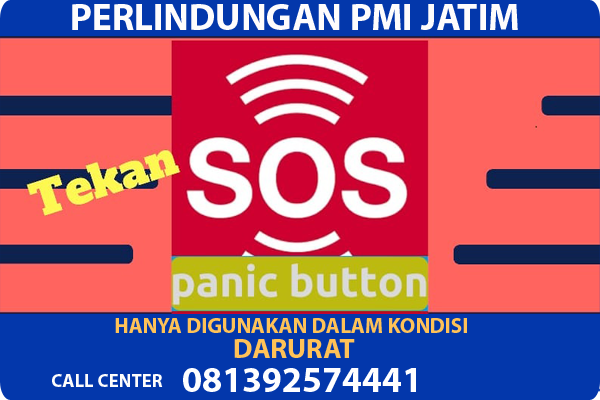
<style>
.page{position:relative;width:600px;height:400px;background:#0337ab}
.page>*{position:absolute;margin:0}
.t1{font:37.3px "MyriadPro-Bold";color:#fefcfc}
.t2{font:21.3px "MyriadPro-Bold";color:#ffc257}
.t3{font:28px "MyriadPro-Bold";color:#ffc257}
.t4{font:18.7px "MyriadPro-Bold";color:#fefdfc}
.t5{font:36px "MyriadPro-Bold";color:#fefeff}
</style>
<div class="page">
<p class="t1" style="left:72px;top:4px;width:446px;height:26px">PERLINDUNGAN PMI JATIM</p>
<p class="t2" style="left:115px;top:318px;width:352px;height:15px">HANYA DIGUNAKAN DALAM KONDISI</p>
<p class="t3" style="left:234px;top:339px;width:121px;height:19px">DARURAT</p>
<p class="t4" style="left:52px;top:374px;width:111px;height:13px">CALL CENTER</p>
<p class="t5" style="left:183px;top:368px;width:233px;height:24px">081392574441</p>
</div>
